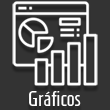
<style>
.page{position:relative;width:110px;height:110px;background:#333333}
.page>*{position:absolute;margin:0}
.t1{font:20.8px "Homenaje-Regular";color:#ffffff}
</style>
<div class="page">
<p class="t1" style="left:29px;top:91px;width:52px;height:15px">Gráficos</p>
</div>
